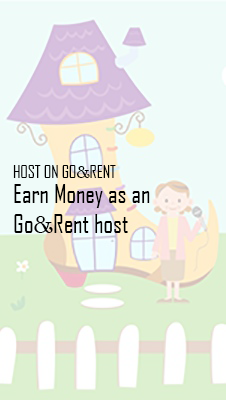
<style>
.page{position:relative;width:226px;height:400px;background:#effbf9}
.page>*{position:absolute;margin:0}
.t1{font:16.7px "AgencyFB-Reg";color:#000000}
.t2{font:16.7px "BookmanOldStyle";color:#000000}
.t3{font:25px "AgencyFB-Reg";color:#000000}
.t4{font:25px "BookmanOldStyle";color:#000000}
</style>
<div class="page">
<p class="t1" style="left:13px;top:165px;width:103px;height:13px">HOST ON GO<span class="t2">&amp;</span>RENT</p>
<p class="t3" style="left:14px;top:184px;width:136px;height:49px;text-align:right">Earn Money as an Go<span class="t4">&amp;</span>Rent host</p>
</div>
